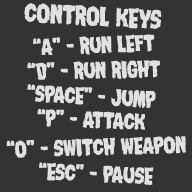
<style>
.page{position:relative;width:192px;height:192px;background:#333333}
.page>*{position:absolute;margin:0}
.t1{font:30px "NightmareAlley";color:#e1e1e1}
.t2{font:26px "NightmareAlley";color:#e1e1e1}
</style>
<div class="page">
<p class="t1" style="left:24px;top:3px;width:138px;height:26px;rotate:3deg">CONTROL KEYS</p>
<p class="t2" style="left:33px;top:34px;width:122px;height:21px;rotate:-2deg">“A” - RUN LEFT</p>
<p class="t2" style="left:27px;top:60px;width:133px;height:20px;rotate:-1deg">“D” - RUN RIGHT</p>
<p class="t2" style="left:27px;top:84px;width:129px;height:24px;rotate:3deg">“SPACE” - JUMP</p>
<p class="t2" style="left:37px;top:108px;width:108px;height:22px;rotate:2deg">“P” - ATTACK</p>
<p class="t2" style="left:6px;top:136px;width:180px;height:22px;rotate:-2deg">“O” - SWITCH WEAPON</p>
<p class="t2" style="left:38px;top:162px;width:116px;height:23px;rotate:3deg">“ESC” - PAUSE</p>
</div>
